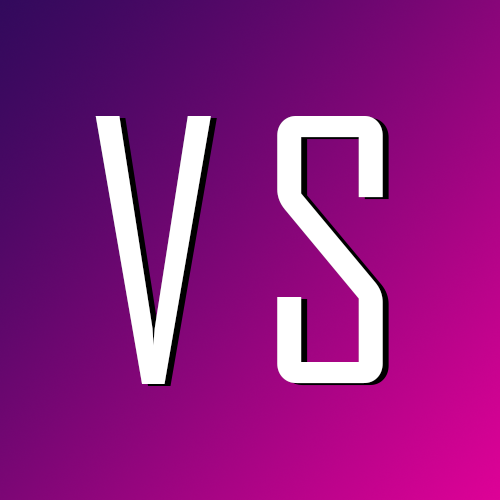
<style>
.page{position:relative;width:500px;height:500px}
.page>*{position:absolute;margin:0}
.t1{font:350px "AgencyFB-Reg";letter-spacing:0.1em;color:#ffffff}
</style>
<div class="page">
<p class="t1" style="left:95px;top:116px;width:288px;height:268px">VS</p>
</div>
